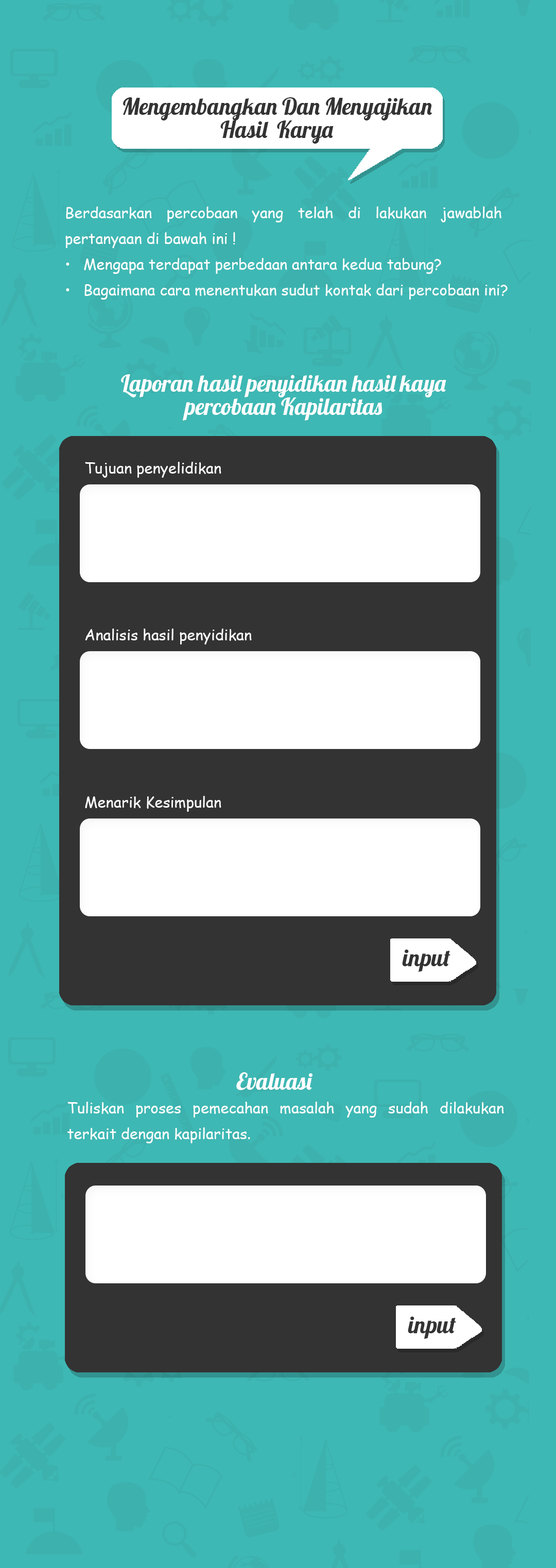
<style>
.page{position:relative;width:556px;height:1568px;background:#3eb8b4}
.page>*{position:absolute;margin:0}
.t1{font:22.9px/22.9px "Lobster-Regular";color:#333333}
.t2{font:15px/25.7px "ComicSansMS";color:#ffffff}
.t3{font:22.9px/22.9px "Lobster-Regular";color:#ffffff}
.t4{font:15px "ComicSansMS";color:#ffffff}
.t5{font:23.6px "Lobster-Regular";color:#333333}
.t6{font:22.9px "Lobster-Regular";color:#ffffff}
</style>
<div class="page">
<p class="t1" style="left:123px;top:97px;width:309px;height:47px;text-align:center">Mengembangkan Dan Menyajikan<br>Hasil  Karya</p>
<p class="t2" style="left:65px;top:206px;width:443px;height:94px;text-align:justify">Berdasarkan percobaan yang telah di lakukan jawablah pertanyaan di bawah ini !<br>• Mengapa terdapat perbedaan antara kedua tabung?<br>• Bagaimana cara menentukan sudut kontak dari percobaan ini?</p>
<p class="t3" style="left:121px;top:374px;width:325px;height:47px;text-align:center">Laporan hasil penyidikan hasil kaya percobaan Kapilaritas</p>
<p class="t4" style="left:85px;top:462px;width:136px;height:16px">Tujuan penyelidikan</p>
<p class="t4" style="left:85px;top:629px;width:167px;height:15px">Analisis hasil penyidikan</p>
<p class="t4" style="left:85px;top:796px;width:136px;height:16px">Menarik Kesimpulan</p>
<p class="t5" style="left:402px;top:949px;width:48px;height:23px">input</p>
<p class="t6" style="left:236px;top:1072px;width:76px;height:18px">Evaluasi</p>
<p class="t2" style="left:67px;top:1102px;width:437px;height:41px;text-align:justify">Tuliskan proses pemecahan masalah yang sudah dilakukan terkait dengan kapilaritas.</p>
<p class="t5" style="left:408px;top:1316px;width:48px;height:23px">input</p>
</div>
